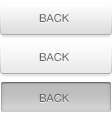
<style>
.page{position:relative;width:112px;height:117px}
.page>*{position:absolute;margin:0}
.t1{font:11px "HelveticaNeue";color:#666666}
</style>
<div class="page">
<p class="t1" style="left:39px;top:14px;width:30px;height:9px">BACK</p>
<p class="t1" style="left:39px;top:53px;width:30px;height:9px">BACK</p>
<p class="t1" style="left:39px;top:94px;width:30px;height:9px">BACK</p>
</div>
